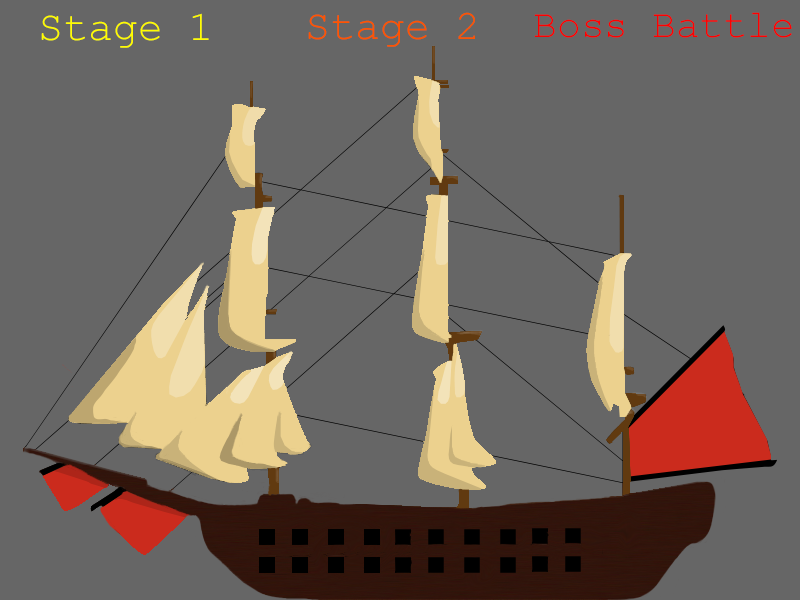
<style>
.page{position:relative;width:800px;height:600px;background:#666666}
.page>*{position:absolute;margin:0}
.t1{font:41.7px "CourierNewPSMT";color:#fffc00}
.t2{font:41.7px "CourierNewPSMT";color:#ff5400}
.t3{font:39.6px "CourierNewPSMT";color:#ff0000}
</style>
<div class="page">
<p class="t1" style="left:41px;top:13px;width:168px;height:35px">Stage 1</p>
<p class="t2" style="left:308px;top:12px;width:167px;height:35px">Stage 2</p>
<p class="t3" style="left:534px;top:12px;width:258px;height:26px">Boss Battle</p>
</div>
